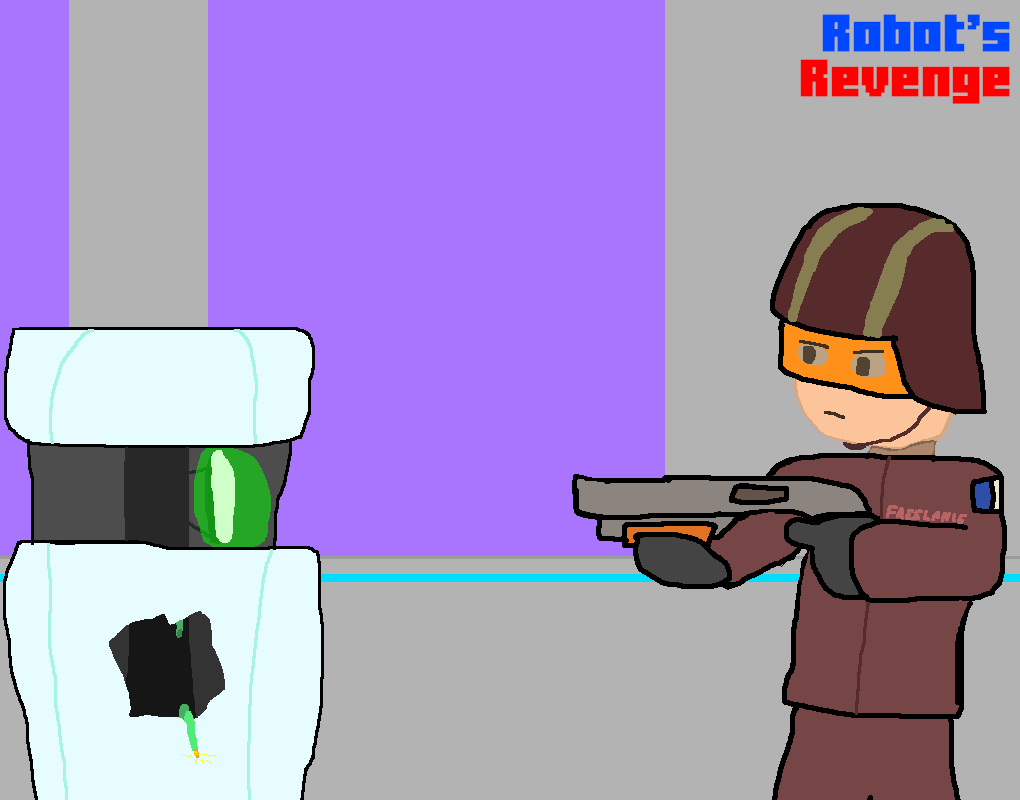
<style>
.page{position:relative;width:1020px;height:800px;background:#b3b3b3}
.page>*{position:absolute;margin:0}
.t1{font:37.5px "MinercraftoryRegular";color:#0048ff;font-weight:bold}
.t2{font:37.5px "MinercraftoryRegular";color:#ff0000;font-weight:bold}
</style>
<div class="page">
<p class="t1" style="left:800px;top:14px;width:210px;height:90px;text-align:right">Robot’s <br><span class="t2">Revenge</span></p>
</div>
